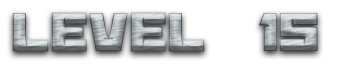
<style>
.page{position:relative;width:364px;height:64px;background:#ffffff}
.page>*{position:absolute;margin:0}
.t1{font:60px "BananaBrick"}
</style>
<div class="page">
<p class="t1" style="left:12px;top:12px;width:306px;height:40px">Level  15</p>
</div>
